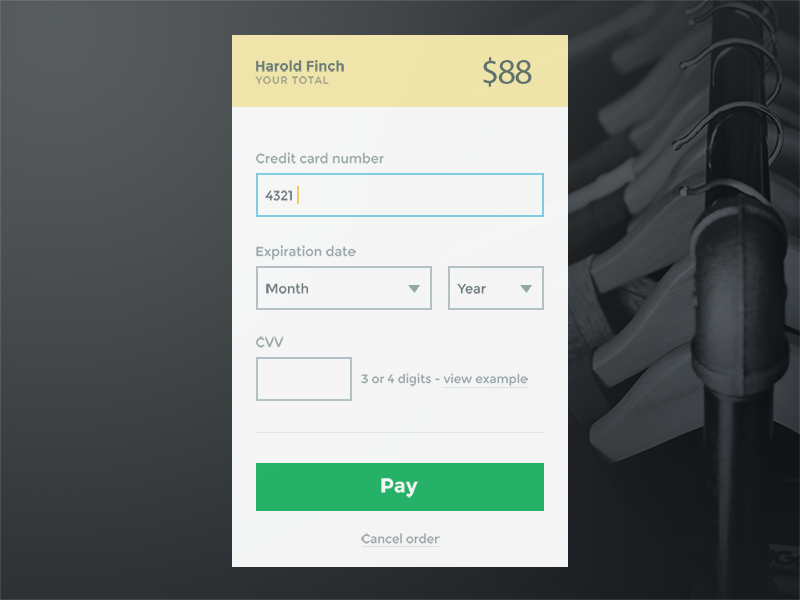
<style>
.page{position:relative;width:800px;height:600px}
.page>*{position:absolute;margin:0}
.t1{font:14px "Montserrat-Bold";color:#6e7f7b}
.t2{font:36px "MyriadPro-Regular";letter-spacing:-0.05em;color:#637570}
.t3{font:10px "Montserrat-Regular";letter-spacing:0.075em;color:#a6a28d;text-transform:uppercase}
.t4{font:13px "Montserrat-Regular";color:#9eabad}
.t5{font:13px "Montserrat-Regular";color:#727f82}
.t6{font:12px "Montserrat-Regular";color:#9eabad}
.t7{font:20px "Montserrat-Bold";color:#ffffff}
</style>
<div class="page">
<p class="t1" style="left:256px;top:60px;width:88px;height:12px">Harold Finch</p>
<p class="t2" style="left:483px;top:57px;width:49px;height:30px">$88</p>
<p class="t3" style="left:255px;top:76px;width:74px;height:8px">Your Total</p>
<p class="t4" style="left:256px;top:152px;width:128px;height:12px">Credit card number</p>
<p class="t5" style="left:265px;top:190px;width:27px;height:11px">4321</p>
<p class="t4" style="left:256px;top:245px;width:100px;height:15px">Expiration date</p>
<p class="t5" style="left:266px;top:283px;width:42px;height:11px">Month</p>
<p class="t5" style="left:456px;top:284px;width:30px;height:10px">Year</p>
<p class="t4" style="left:256px;top:336px;width:28px;height:12px">CVV</p>
<p class="t6" style="left:361px;top:372px;width:167px;height:15px">3 or 4 digits - view example</p>
<p class="t7" style="left:381px;top:478px;width:38px;height:20px">Pay</p>
<p class="t6" style="left:361px;top:533px;width:79px;height:11px">Cancel order</p>
</div>
